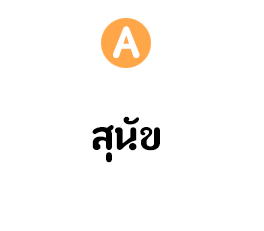
<style>
.page{position:relative;width:264px;height:231px;background:#ffffff}
.page>*{position:absolute;margin:0}
.t1{font:65px "paaymaay";color:#ffffff}
.t2{font:60px "paaymaay";color:#000000}
</style>
<div class="page">
<p class="t1" style="left:113px;top:26px;width:27px;height:33px">A</p>
<p class="t2" style="left:92px;top:116px;width:68px;height:47px">สุนัข</p>
</div>
